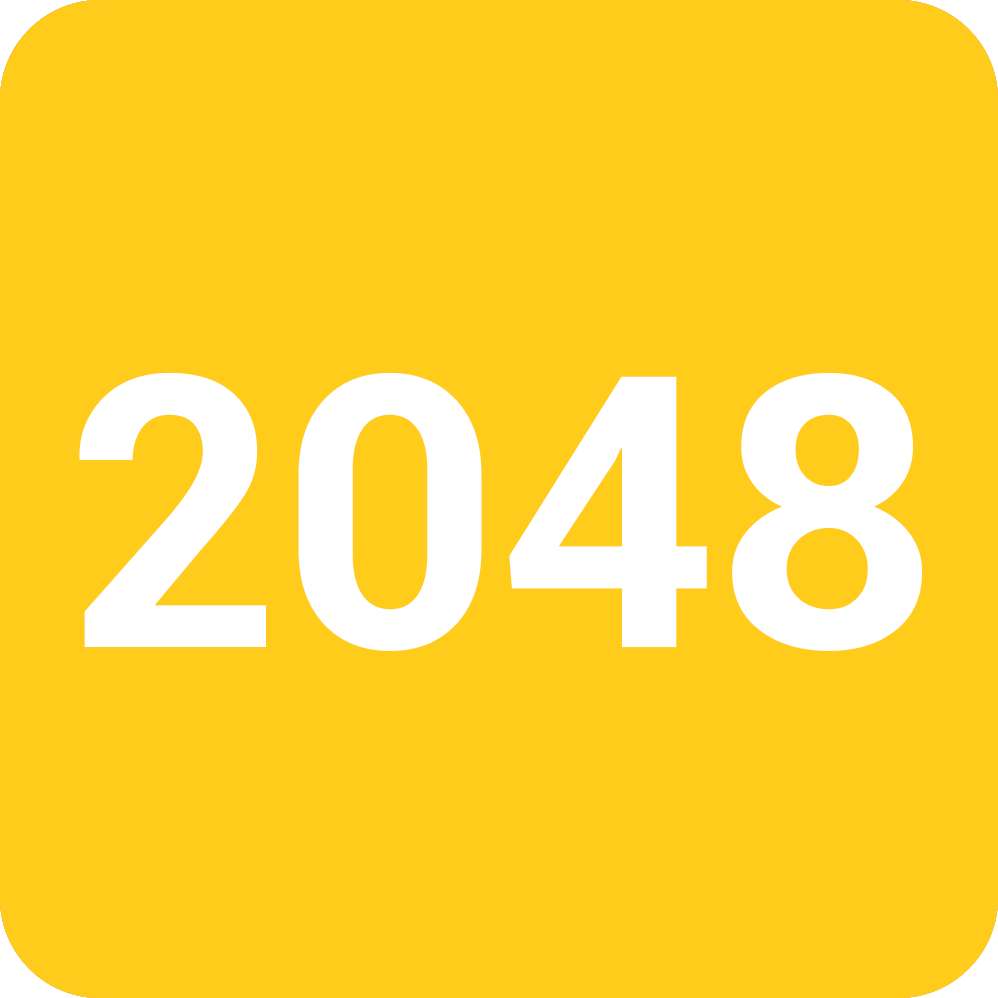
<style>
.page{position:relative;width:998px;height:998px;background:#ffcc1c}
.page>*{position:absolute;margin:0}
.t1{font:380px "Roboto-Bold";color:#ffffff}
</style>
<div class="page">
<p class="t1" style="left:79px;top:372px;width:844px;height:279px">2048</p>
</div>
